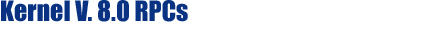
<style>
.page{position:relative;width:429px;height:29px;background:#ffffff}
.page>*{position:absolute;margin:0}
.t1{font:26px "Impact";color:#093282}
</style>
<div class="page">
<p class="t1" style="left:1px;top:0px;width:187px;height:22px">Kernel V. 8.0 RPCs</p>
</div>
